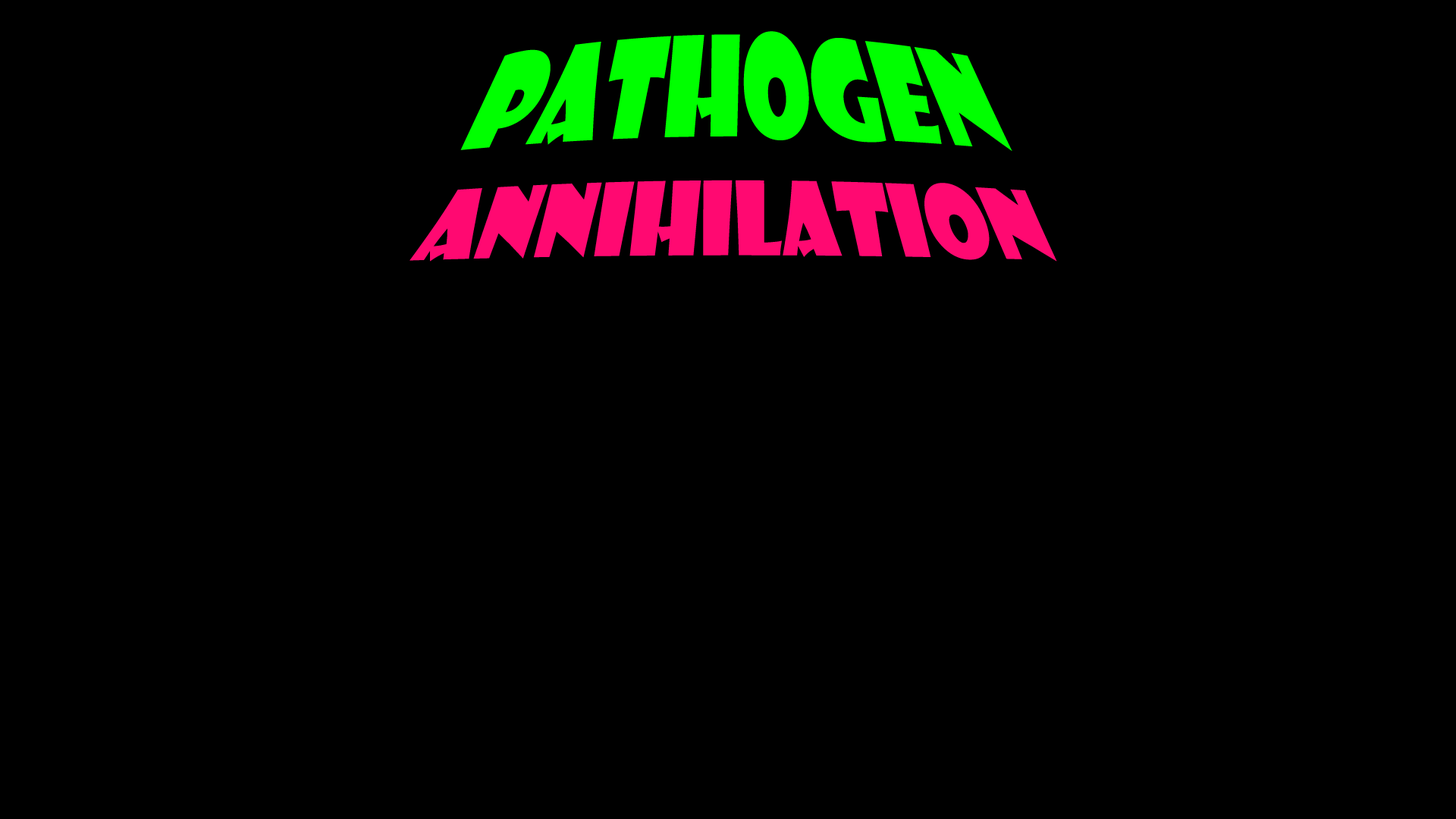
<style>
.page{position:relative;width:1456px;height:819px;background:#000000}
.page>*{position:absolute;margin:0}
.t1{font:83.4px "ShowcardGothic-Reg";color:#ff0971}
.t2{font:113.7px "ShowcardGothic-Reg";color:#00ff00}
</style>
<div class="page">
<p class="t1" style="left:409px;top:31px;width:648px;height:231px;text-align:center"><span class="t2">PATHOGEN<br></span>ANNIHILATION</p>
</div>
